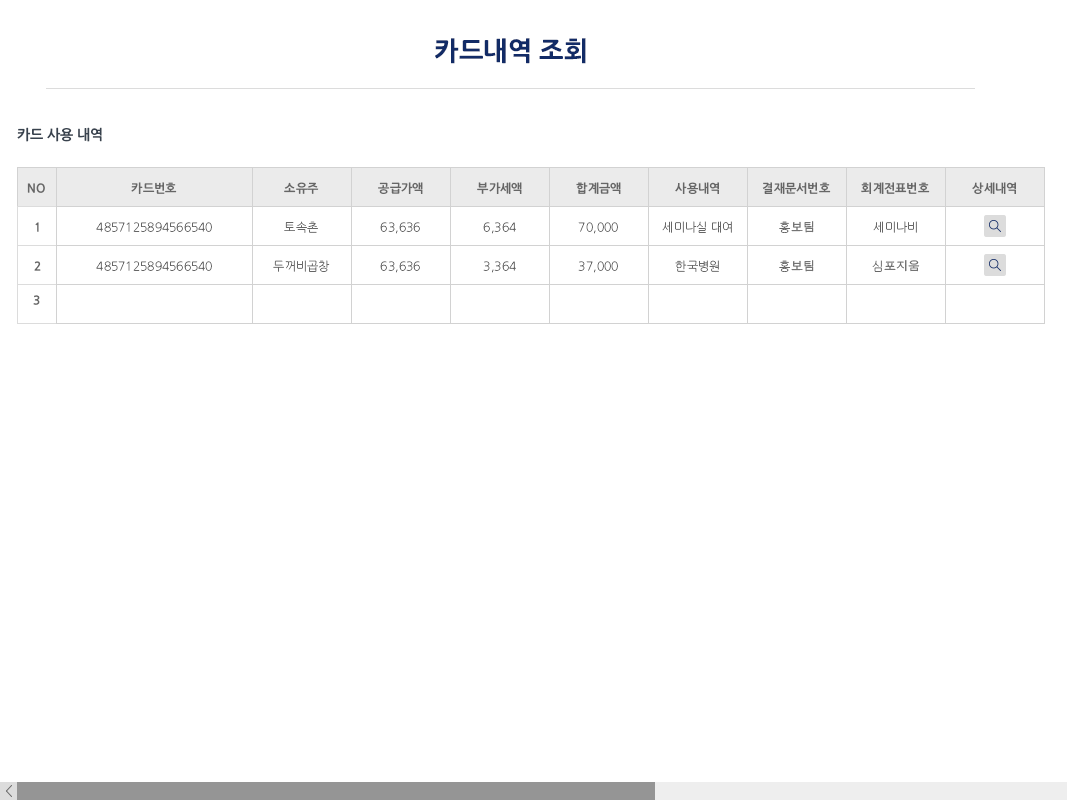
<style>
.page{position:relative;width:1067px;height:800px;background:#ffffff}
.page>*{position:absolute;margin:0}
.t1{font:26px "NanumGothicOTFExtraBold";color:#122b66}
.t2{font:14px "NanumGothicOTFBold";color:#38424e}
.t3{font:12px "NanumGothicOTFBold";color:#666666}
.t4{font:12px "NanumGothicOTFLight";color:#666666}
.t5{font:12px "AppleGothic";color:#666666}
.t6{font:12px "NanumGothicOTFLight"}
</style>
<div class="page">
<p class="t1" style="left:435px;top:38px;width:151px;height:26px">카드내역 조회</p>
<p class="t2" style="left:17px;top:127px;width:85px;height:15px">카드 사용 내역</p>
<p class="t3" style="left:27px;top:183px;width:18px;height:10px">NO</p>
<p class="t3" style="left:131px;top:182px;width:46px;height:12px">카드번호</p>
<p class="t3" style="left:284px;top:182px;width:35px;height:12px">소유주</p>
<p class="t3" style="left:378px;top:182px;width:45px;height:12px">공급가액</p>
<p class="t3" style="left:477px;top:182px;width:45px;height:12px">부가세액</p>
<p class="t3" style="left:576px;top:182px;width:45px;height:12px">합계금액</p>
<p class="t3" style="left:675px;top:182px;width:44px;height:12px">사용내역</p>
<p class="t3" style="left:762px;top:182px;width:69px;height:12px">결재문서번호</p>
<p class="t3" style="left:861px;top:182px;width:69px;height:12px">회계전표번호</p>
<p class="t3" style="left:972px;top:182px;width:44px;height:12px">상세내역</p>
<p class="t3" style="left:35px;top:222px;width:4px;height:10px">1</p>
<p class="t4" style="left:96px;top:222px;width:116px;height:10px">4857125894566540</p>
<p class="t4" style="left:284px;top:221px;width:34px;height:12px">토속촌</p>
<p class="t4" style="left:284px;top:221px;width:34px;height:12px">토속촌</p>
<p class="t4" style="left:380px;top:222px;width:40px;height:12px">63,636</p>
<p class="t4" style="left:380px;top:222px;width:40px;height:12px">63,636</p>
<p class="t4" style="left:483px;top:222px;width:33px;height:12px">6,363</p>
<p class="t4" style="left:483px;top:222px;width:33px;height:12px">6,364</p>
<p class="t4" style="left:578px;top:222px;width:40px;height:12px">70,000</p>
<p class="t4" style="left:578px;top:222px;width:40px;height:12px">70,000</p>
<p class="t4" style="left:662px;top:221px;width:70px;height:12px">세미나실 대여</p>
<p class="t5" style="left:779px;top:221px;width:35px;height:12px"><span class="t4">홍</span>보팀</p>
<p class="t4" style="left:873px;top:221px;width:44px;height:12px">세미나비</p>
<p class="t3" style="left:34px;top:261px;width:7px;height:10px">2</p>
<p class="t4" style="left:96px;top:261px;width:116px;height:10px">4857125894566540</p>
<p class="t4" style="left:273px;top:260px;width:57px;height:12px">두꺼비곱창</p>
<p class="t4" style="left:380px;top:261px;width:40px;height:12px">63,636</p>
<p class="t4" style="left:380px;top:261px;width:40px;height:12px">63,636</p>
<p class="t6" style="left:483px;top:261px;width:33px;height:12px">6,363</p>
<p class="t4" style="left:483px;top:261px;width:33px;height:12px">3,364</p>
<p class="t4" style="left:578px;top:261px;width:40px;height:12px">70,000</p>
<p class="t4" style="left:578px;top:261px;width:40px;height:12px">37,000</p>
<p class="t4" style="left:675px;top:260px;width:44px;height:12px">한국병원</p>
<p class="t5" style="left:779px;top:260px;width:35px;height:12px"><span class="t4">홍</span>보팀</p>
<p class="t5" style="left:872px;top:260px;width:48px;height:12px"><span class="t4">심</span>포지움</p>
<p class="t3" style="left:33px;top:295px;width:7px;height:10px">3</p>
</div>
